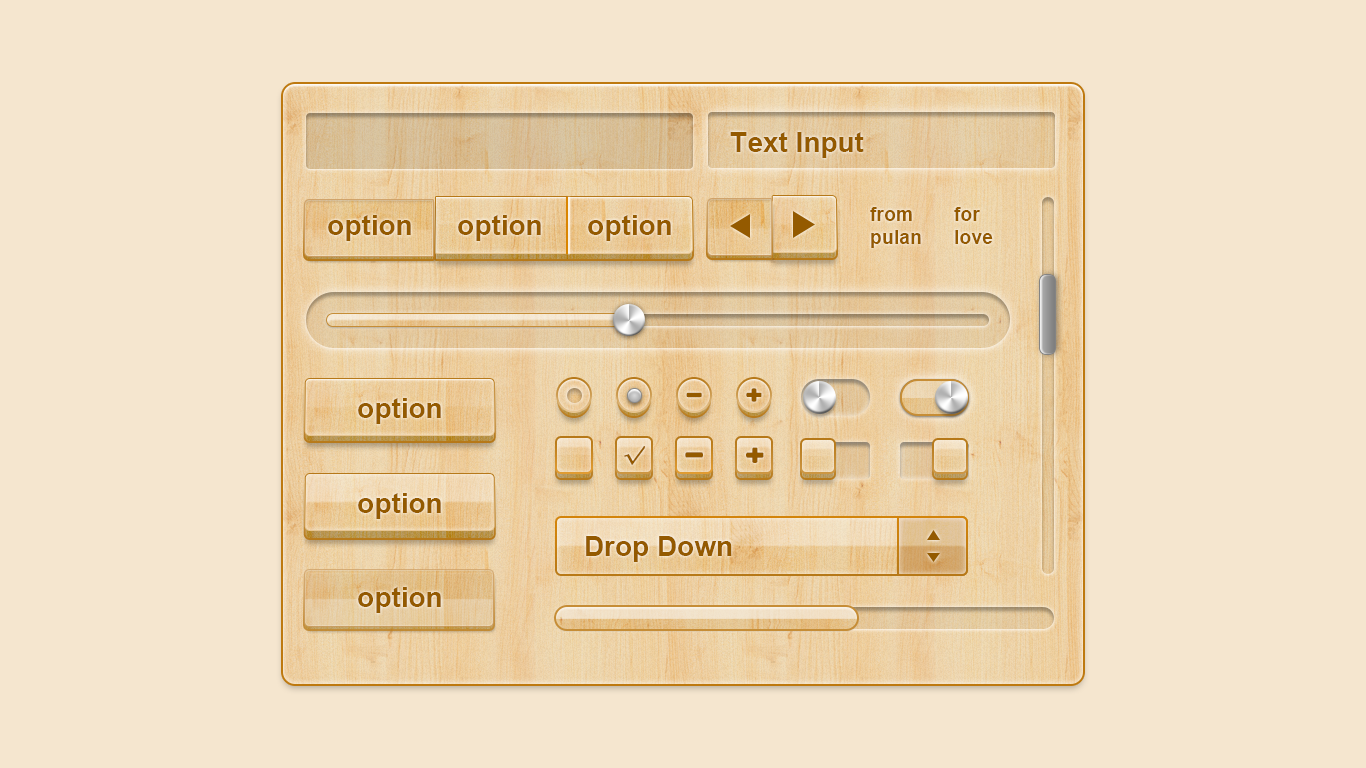
<style>
.page{position:relative;width:1366px;height:768px;background:#f5e6cf}
.page>*{position:absolute;margin:0}
.t1{font:28px "Arial-BoldMT";color:#945a00}
.t2{font:19.5px "Arial-BoldMT";color:#945a00}
.t3{font:24.2px "STHupo";color:#945a00;font-weight:bold}
.t4{font:21.1px "AdobeHeitiStd-Regular";color:#945a00;font-weight:bold}
.t5{font:27.9px "STHupo";color:#945a00;font-weight:bold}
.t6{font:28px "STHupo";color:#945a00;font-weight:bold}
</style>
<div class="page">
<p class="t1" style="left:730px;top:132px;width:134px;height:26px">Text Input</p>
<p class="t2" style="left:870px;top:207px;width:51px;height:41px">from <br>pulan</p>
<p class="t2" style="left:954px;top:207px;width:39px;height:37px">for <br>love</p>
<p class="t1" style="left:328px;top:215px;width:83px;height:26px">option</p>
<p class="t1" style="left:458px;top:215px;width:83px;height:26px">option</p>
<p class="t1" style="left:588px;top:215px;width:83px;height:26px">option</p>
<p class="t3" style="left:746px;top:388px;width:16px;height:14px">＋</p>
<p class="t1" style="left:358px;top:398px;width:83px;height:26px">option</p>
<p class="t3" style="left:686px;top:392px;width:16px;height:6px">－</p>
<p class="t4" style="left:624px;top:446px;width:21px;height:19px">√</p>
<p class="t5" style="left:746px;top:447px;width:18px;height:16px">＋</p>
<p class="t6" style="left:685px;top:452px;width:18px;height:6px">－</p>
<p class="t1" style="left:358px;top:493px;width:83px;height:26px">option</p>
<p class="t1" style="left:586px;top:536px;width:146px;height:26px">Drop Down</p>
<p class="t1" style="left:358px;top:587px;width:83px;height:26px">option</p>
</div>
